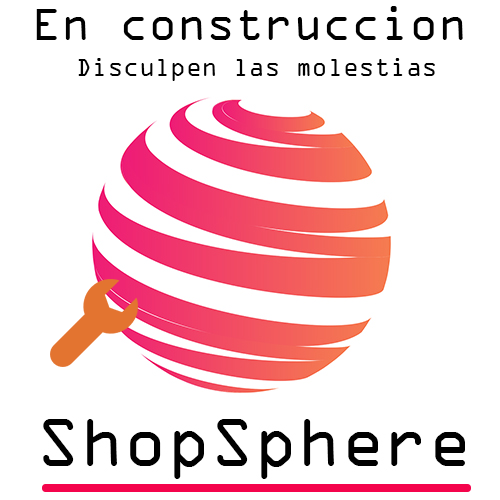
<style>
.page{position:relative;width:500px;height:500px;background:#ffffff}
.page>*{position:absolute;margin:0}
.t1{font:48px "OCRAExtended";color:#000000}
.t2{font:26px "OCRAExtended";color:#000000}
</style>
<div class="page">
<p class="t1" style="left:36px;top:6px;width:427px;height:34px">En construccion</p>
<p class="t2" style="left:78px;top:58px;width:357px;height:23px">Disculpen las molestias</p>
</div>
